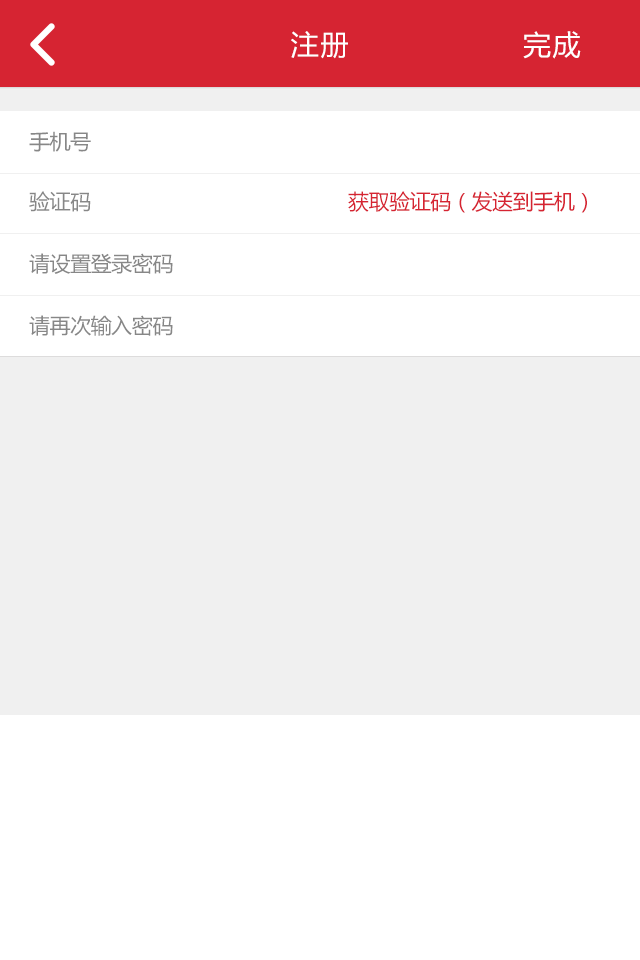
<style>
.page{position:relative;width:640px;height:960px;background:#ffffff}
.page>*{position:absolute;margin:0}
.t1{font:28px "MicrosoftYaHei";letter-spacing:0.06em;color:#ffffff}
.t2{font:21px "MicrosoftYaHei";letter-spacing:-0.02em;color:#878787}
.t3{font:21px "MicrosoftYaHei";letter-spacing:-0.02em;color:#d62432}
</style>
<div class="page">
<p class="t1" style="left:291px;top:31px;width:57px;height:28px">注册</p>
<p class="t1" style="left:523px;top:31px;width:58px;height:28px">完成</p>
<p class="t2" style="left:29px;top:131px;width:62px;height:21px">手机号</p>
<p class="t2" style="left:29px;top:191px;width:62px;height:21px">验证码</p>
<p class="t3" style="left:348px;top:191px;width:239px;height:22px">获取验证码（发送到手机）</p>
<p class="t2" style="left:29px;top:253px;width:144px;height:21px">请设置登录密码</p>
<p class="t2" style="left:29px;top:315px;width:144px;height:21px">请再次输入密码</p>
</div>
